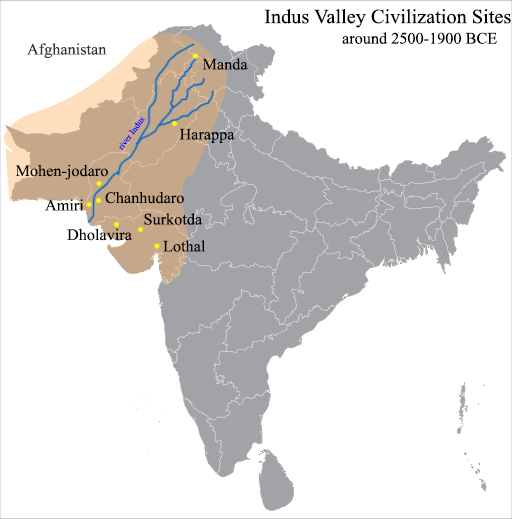
<style>
.page{position:relative;width:512px;height:519px;background:#ffffff}
.page>*{position:absolute;margin:0}
.t1{font:30px "Microsoft-Himalaya";color:#000000}
.t2{font:24px "Microsoft-Himalaya";color:#000000}
.t3{font:24px "Microsoft-Himalaya";color:#333333}
.t4{font:13.1px "Microsoft-Himalaya";color:#0000ff}
</style>
<div class="page">
<p class="t1" style="left:264px;top:9px;width:247px;height:19px">Indus Valley Civilization Sites</p>
<p class="t2" style="left:342px;top:32px;width:155px;height:12px">around 2500-1900 BCE</p>
<p class="t3" style="left:27px;top:43px;width:80px;height:15px">Afghanistan</p>
<p class="t2" style="left:202px;top:58px;width:46px;height:12px">Manda</p>
<p class="t4" style="left:119px;top:117px;width:26px;height:34px;rotate:-54deg">river Indus</p>
<p class="t2" style="left:179px;top:128px;width:56px;height:15px">Harappa</p>
<p class="t2" style="left:15px;top:164px;width:93px;height:16px">Mohen-jodaro</p>
<p class="t2" style="left:105px;top:191px;width:79px;height:13px">Chanhudaro</p>
<p class="t2" style="left:45px;top:199px;width:39px;height:12px">Amiri</p>
<p class="t2" style="left:144px;top:213px;width:59px;height:12px">Surkotda</p>
<p class="t2" style="left:67px;top:228px;width:65px;height:13px">Dholavira</p>
<p class="t2" style="left:163px;top:240px;width:43px;height:12px">Lothal</p>
</div>
